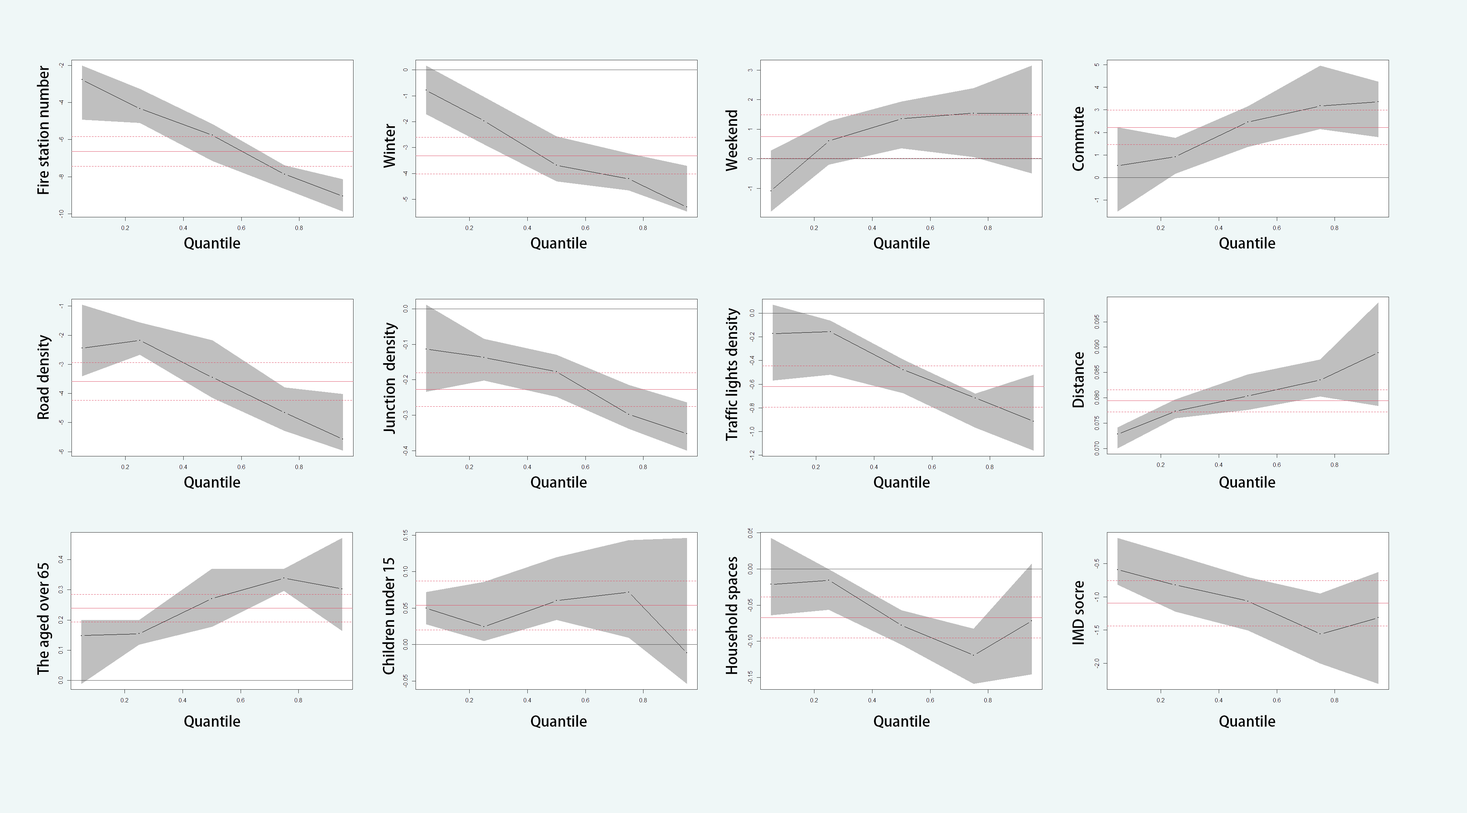
<style>
.page{position:relative;width:1467px;height:813px;background:#eff7f7}
.page>*{position:absolute;margin:0}
.t1{font:14.5px "AdobeHeitiStd-Regular";color:#000000}
</style>
<div class="page">
<p class="t1" style="left:37px;top:66px;width:12px;height:128px;rotate:-90deg">Fire station number</p>
<p class="t1" style="left:725px;top:110px;width:12px;height:61px;rotate:-90deg">Weekend</p>
<p class="t1" style="left:1072px;top:107px;width:11px;height:64px;rotate:-90deg">Commute</p>
<p class="t1" style="left:384px;top:124px;width:11px;height:44px;rotate:-90deg">Winter</p>
<p class="t1" style="left:184px;top:237px;width:56px;height:13px">Quantile</p>
<p class="t1" style="left:531px;top:237px;width:56px;height:13px">Quantile</p>
<p class="t1" style="left:874px;top:237px;width:56px;height:13px">Quantile</p>
<p class="t1" style="left:1219px;top:237px;width:56px;height:13px">Quantile</p>
<p class="t1" style="left:725px;top:308px;width:16px;height:133px;rotate:-90deg">Traffic lights density</p>
<p class="t1" style="left:383px;top:323px;width:15px;height:111px;rotate:-90deg">Junction  density</p>
<p class="t1" style="left:37px;top:335px;width:15px;height:84px;rotate:-90deg">Road density</p>
<p class="t1" style="left:1072px;top:352px;width:11px;height:55px;rotate:-90deg">Distance</p>
<p class="t1" style="left:184px;top:476px;width:56px;height:13px">Quantile</p>
<p class="t1" style="left:531px;top:476px;width:56px;height:13px">Quantile</p>
<p class="t1" style="left:874px;top:476px;width:56px;height:13px">Quantile</p>
<p class="t1" style="left:1219px;top:476px;width:56px;height:13px">Quantile</p>
<p class="t1" style="left:725px;top:557px;width:15px;height:117px;rotate:-90deg">Household spaces</p>
<p class="t1" style="left:37px;top:563px;width:15px;height:112px;rotate:-90deg">The aged over 65</p>
<p class="t1" style="left:382px;top:558px;width:12px;height:116px;rotate:-90deg">Children under 15</p>
<p class="t1" style="left:1072px;top:581px;width:11px;height:63px;rotate:-90deg">IMD socre</p>
<p class="t1" style="left:184px;top:715px;width:56px;height:14px">Quantile</p>
<p class="t1" style="left:531px;top:715px;width:56px;height:14px">Quantile</p>
<p class="t1" style="left:874px;top:715px;width:56px;height:14px">Quantile</p>
<p class="t1" style="left:1219px;top:715px;width:56px;height:14px">Quantile</p>
</div>
